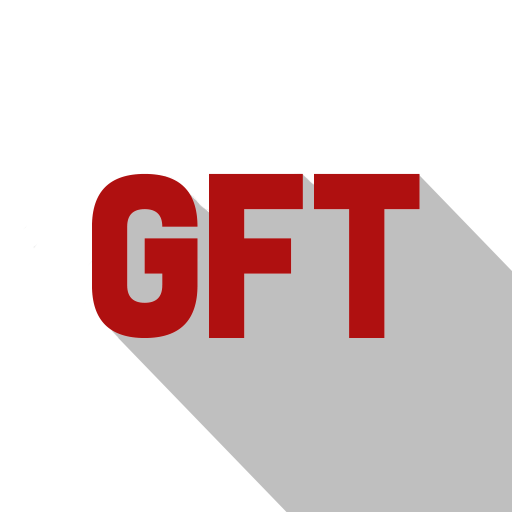
<style>
.page{position:relative;width:512px;height:512px;background:#ffffff}
.page>*{position:absolute;margin:0}
.t1{font:240px "The27Club";color:#af1010}
</style>
<div class="page">
<p class="t1" style="left:92px;top:173px;width:328px;height:165px">GFT</p>
<p class="t1" style="left:92px;top:173px;width:328px;height:165px">GFT</p>
</div>
